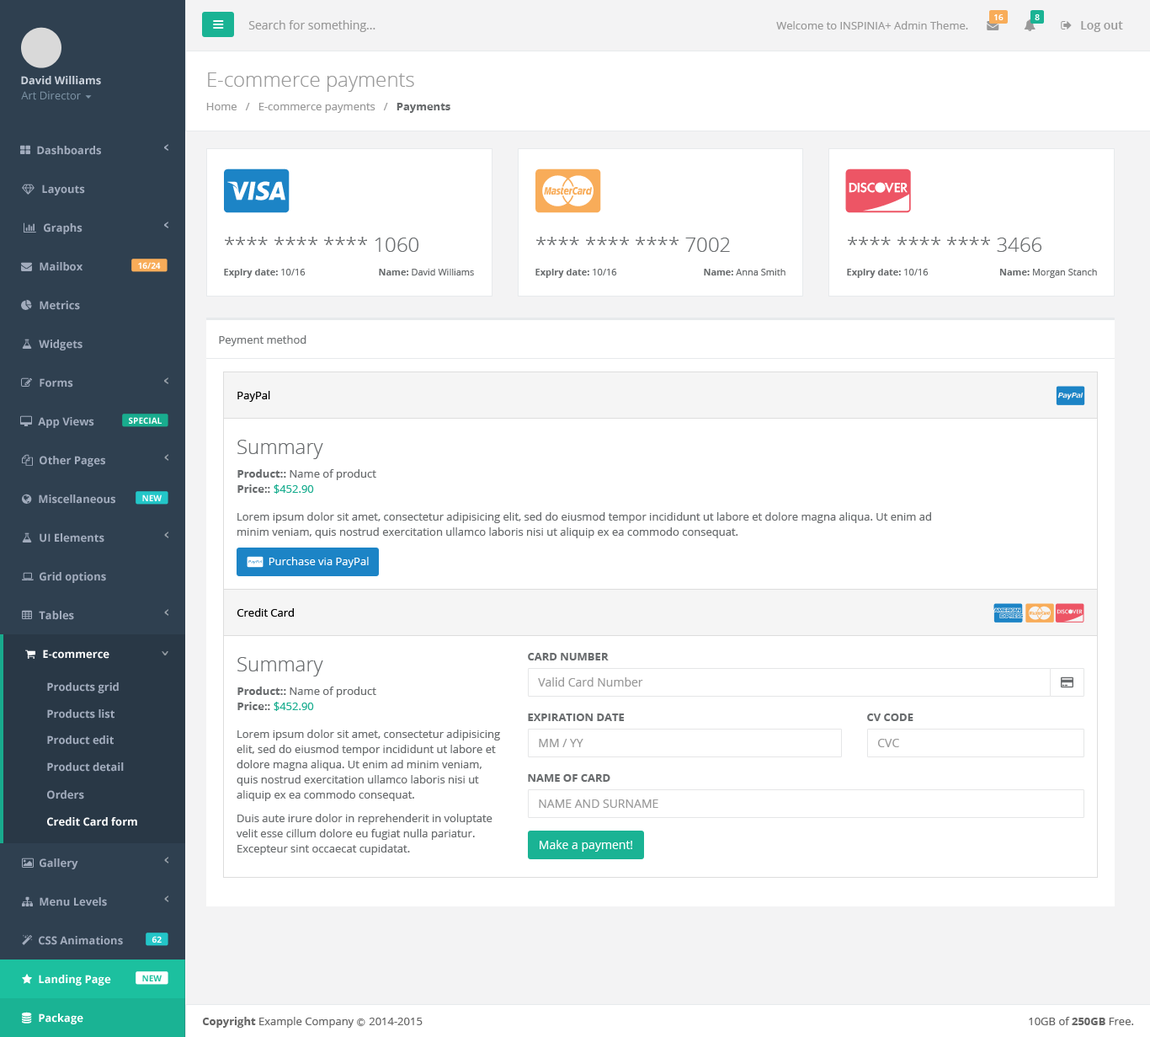
<style>
.page{position:relative;width:1150px;height:1037px;background:#ffffff}
.page>*{position:absolute;margin:0}
.t1{font:8.4px "OpenSans-Semibold";color:#ffffff}
.t2{font:11.8px "OpenSans";color:#999999}
.t3{font:10.9px "OpenSans";color:#999999}
.t4{font:11.8px "OpenSans-Semibold";color:#999999}
.t5{font:10.9px "OpenSans-Bold";color:#cad1db}
.t6{font:20.2px "OpenSans-Light";color:#999999}
.t7{font:10.9px "OpenSans";color:#7d93a5}
.t8{font:10.9px "OpenSans-Bold";color:#676a6c}
.t9{font:10.9px "OpenSans-Bold";color:#a2acbd}
.t10{font:20.2px "OpenSans-Light";color:#696c6e}
.t11{font:8.4px "OpenSans-Bold";color:#fefefe}
.t12{font:9.3px "OpenSans-Bold";color:#696c6e}
.t13{font:9.3px "OpenSans";color:#696c6e}
.t14{font:10.9px "OpenSans";color:#737578}
.t15{font:10.9px "OpenSans";color:#000000}
.t16{font:10.9px "OpenSans";color:#696c6e}
.t17{font:10.9px "OpenSans-Bold";color:#696c6e}
.t18{font:10.9px "OpenSans";color:#19ad8f}
.t19{font:10.9px/15.2px "OpenSans";color:#696c6e}
.t20{font:10.9px "OpenSans";color:#ffffff}
.t21{font:10.9px "OpenSans-Bold";color:#ffffff}
.t22{font:11.8px "OpenSans";color:#ffffff}
.t23{font:8.4px "OpenSans-Bold";color:#1cc09f}
.t24{font:10.9px "OpenSans";color:#666666}
.t25{font:10.9px "OpenSans-Bold";color:#666666}
.t26{font:8.4px "Meiryo";color:#666666}
</style>
<div class="page">
<p class="t1" style="left:995px;top:14px;width:9px;height:6px">16</p>
<p class="t1" style="left:1035px;top:14px;width:5px;height:6px">8</p>
<p class="t2" style="left:248px;top:20px;width:128px;height:12px">Search for something...</p>
<p class="t3" style="left:776px;top:21px;width:192px;height:8px">Welcome to INSPINIA+ Admin Theme.</p>
<p class="t4" style="left:1081px;top:21px;width:42px;height:11px">Log out</p>
<p class="t5" style="left:21px;top:76px;width:80px;height:9px">David Williams</p>
<p class="t6" style="left:208px;top:72px;width:206px;height:20px">E-commerce payments</p>
<p class="t7" style="left:21px;top:91px;width:60px;height:9px">Art Director</p>
<p class="t3" style="left:206px;top:103px;width:245px;height:10px">Home   /   E-commerce payments   /   <span class="t8">Payments</span></p>
<p class="t9" style="left:37px;top:146px;width:64px;height:9px">Dashboards</p>
<p class="t9" style="left:42px;top:184px;width:43px;height:11px">Layouts</p>
<p class="t9" style="left:44px;top:223px;width:39px;height:11px">Graphs</p>
<p class="t10" style="left:225px;top:237px;width:194px;height:15px">**** **** **** 1060</p>
<p class="t10" style="left:536px;top:237px;width:194px;height:15px">**** **** **** 7002</p>
<p class="t10" style="left:848px;top:237px;width:194px;height:15px">**** **** **** 3466</p>
<p class="t9" style="left:40px;top:262px;width:43px;height:9px">Mailbox</p>
<p class="t11" style="left:138px;top:262px;width:23px;height:7px">16/24</p>
<p class="t12" style="left:224px;top:269px;width:82px;height:9px">Expiry date:<span class="t13"> 10/16</span></p>
<p class="t13" style="left:379px;top:269px;width:95px;height:6px"><span class="t12">Name:</span> David Williams</p>
<p class="t12" style="left:536px;top:269px;width:81px;height:9px">Expiry date:<span class="t13"> 10/16</span></p>
<p class="t13" style="left:704px;top:269px;width:82px;height:6px"><span class="t12">Name:</span> Anna Smith</p>
<p class="t12" style="left:847px;top:269px;width:82px;height:9px">Expiry date:<span class="t13"> 10/16</span></p>
<p class="t13" style="left:1000px;top:269px;width:97px;height:9px"><span class="t12">Name:</span> Morgan Stanch</p>
<p class="t9" style="left:40px;top:301px;width:40px;height:9px">Metrics</p>
<p class="t9" style="left:39px;top:339px;width:44px;height:11px">Widgets</p>
<p class="t14" style="left:219px;top:335px;width:88px;height:11px">Peyment method</p>
<p class="t9" style="left:40px;top:378px;width:33px;height:9px">Forms</p>
<p class="t15" style="left:237px;top:391px;width:33px;height:11px">PayPal</p>
<p class="t9" style="left:38px;top:417px;width:56px;height:11px">App Views</p>
<p class="t11" style="left:129px;top:417px;width:33px;height:7px">SPECIAL</p>
<p class="t10" style="left:237px;top:440px;width:86px;height:19px">Summary</p>
<p class="t9" style="left:40px;top:456px;width:65px;height:11px">Other Pages</p>
<p class="t16" style="left:237px;top:469px;width:139px;height:11px"><span class="t17">Product::</span> Name of product</p>
<p class="t17" style="left:237px;top:484px;width:77px;height:9px">Price:: <span class="t18">$452.90</span></p>
<p class="t9" style="left:39px;top:494px;width:76px;height:10px">Miscellaneous</p>
<p class="t11" style="left:142px;top:494px;width:20px;height:7px">NEW</p>
<p class="t19" style="left:237px;top:512px;width:694px;height:26px">Lorem ipsum dolor sit amet, consectetur adipisicing elit, sed do eiusmod tempor incididunt ut labore et dolore magna aliqua. Ut enim ad minim veniam, quis nostrud exercitation ullamco laboris nisi ut aliquip ex ea commodo consequat.</p>
<p class="t9" style="left:40px;top:533px;width:64px;height:9px">UI Elements</p>
<p class="t20" style="left:269px;top:557px;width:100px;height:11px">Purchase via PayPal</p>
<p class="t9" style="left:40px;top:572px;width:66px;height:11px">Grid options</p>
<p class="t9" style="left:39px;top:611px;width:35px;height:9px">Tables</p>
<p class="t15" style="left:237px;top:608px;width:57px;height:8px">Credit Card</p>
<p class="t21" style="left:43px;top:649px;width:66px;height:10px">E-commerce</p>
<p class="t17" style="left:528px;top:653px;width:81px;height:7px">CARD NUMBER</p>
<p class="t10" style="left:237px;top:657px;width:86px;height:19px">Summary</p>
<p class="t2" style="left:538px;top:677px;width:105px;height:9px">Valid Card Number</p>
<p class="t9" style="left:47px;top:682px;width:72px;height:11px">Products grid</p>
<p class="t16" style="left:237px;top:686px;width:139px;height:11px"><span class="t17">Product::</span> Name of product</p>
<p class="t17" style="left:237px;top:701px;width:77px;height:10px">Price:: <span class="t18">$452.90</span></p>
<p class="t9" style="left:47px;top:709px;width:68px;height:9px">Products list</p>
<p class="t17" style="left:528px;top:713px;width:97px;height:8px">EXPIRATION DATE</p>
<p class="t17" style="left:867px;top:713px;width:47px;height:8px">CV CODE</p>
<p class="t9" style="left:47px;top:735px;width:67px;height:9px">Product edit</p>
<p class="t19" style="left:237px;top:729px;width:263px;height:126px">Lorem ipsum dolor sit amet, consectetur adipisicing elit, sed do eiusmod tempor incididunt ut labore et dolore magna aliqua. Ut enim ad minim veniam, quis nostrud exercitation ullamco laboris nisi ut aliquip ex ea commodo consequat.<br><br>Duis aute irure dolor in reprehenderit in voluptate velit esse cillum dolore eu fugiat nulla pariatur. Excepteur sint occaecat cupidatat.</p>
<p class="t2" style="left:539px;top:739px;width:45px;height:8px">MM / YY</p>
<p class="t2" style="left:878px;top:739px;width:21px;height:8px">CVC</p>
<p class="t9" style="left:47px;top:762px;width:77px;height:9px">Product detail</p>
<p class="t17" style="left:528px;top:774px;width:83px;height:7px">NAME OF CARD</p>
<p class="t9" style="left:47px;top:790px;width:37px;height:9px">Orders</p>
<p class="t2" style="left:539px;top:799px;width:120px;height:9px">NAME AND SURNAME</p>
<p class="t21" style="left:47px;top:817px;width:90px;height:9px">Credit Card form</p>
<p class="t22" style="left:540px;top:840px;width:92px;height:11px">Make a payment!</p>
<p class="t9" style="left:40px;top:858px;width:38px;height:11px">Gallery</p>
<p class="t9" style="left:40px;top:897px;width:67px;height:9px">Menu Levels</p>
<p class="t9" style="left:39px;top:936px;width:84px;height:9px">CSS Animations</p>
<p class="t11" style="left:152px;top:936px;width:10px;height:6px">62</p>
<p class="t21" style="left:39px;top:974px;width:72px;height:11px">Landing Page</p>
<p class="t23" style="left:142px;top:974px;width:20px;height:7px">NEW</p>
<p class="t21" style="left:39px;top:1013px;width:44px;height:11px">Package</p>
<p class="t24" style="left:202px;top:1016px;width:221px;height:11px"><span class="t25">Copyright</span> Example Company <span class="t26">Ⓒ </span>2014-2015</p>
<p class="t24" style="left:1029px;top:1016px;width:105px;height:9px">10GB of <span class="t25">250GB</span> Free.</p>
</div>
